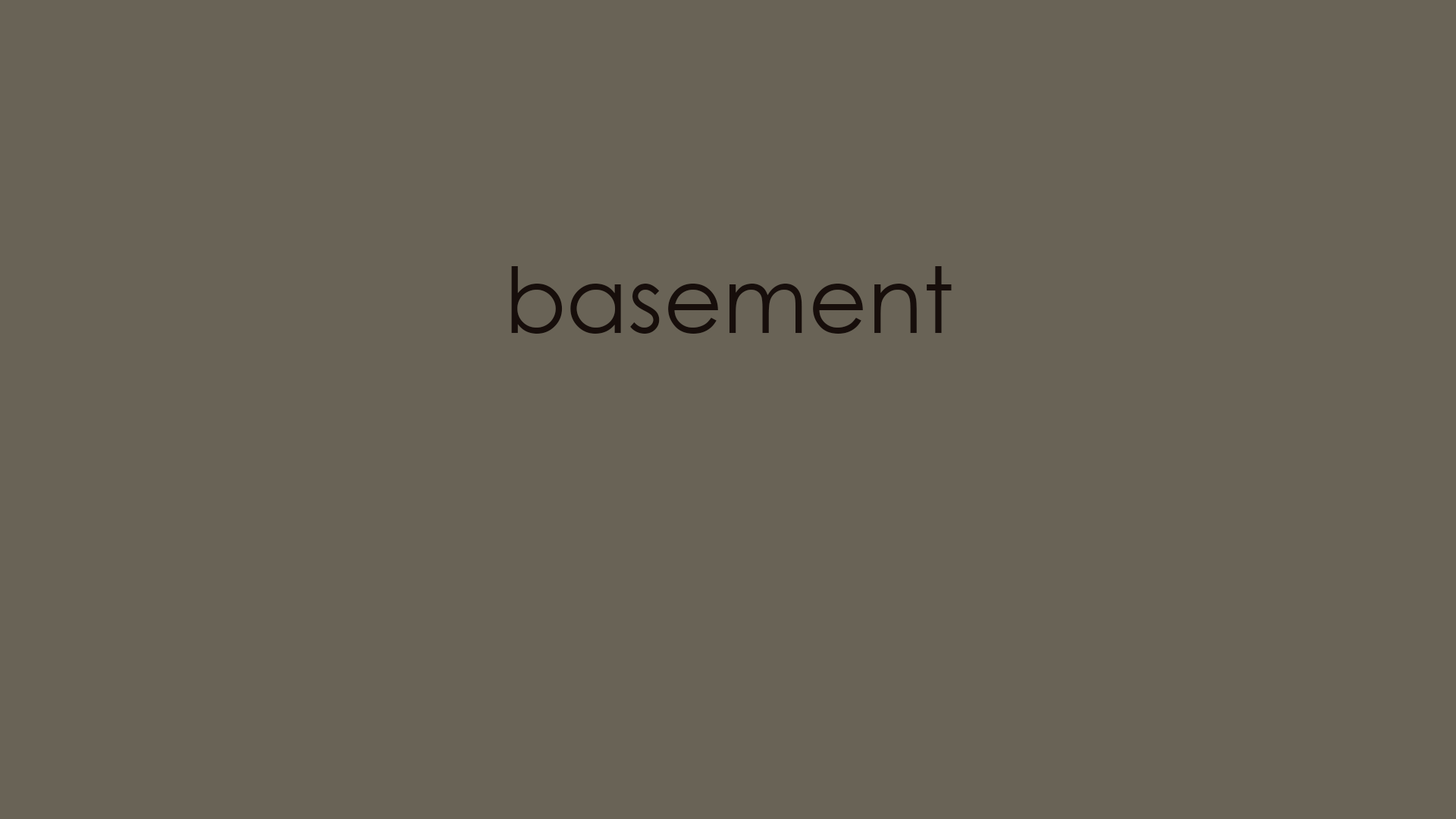
<style>
.page{position:relative;width:1456px;height:819px;background:#696356}
.page>*{position:absolute;margin:0}
.t1{font:91px "CenturyGothic";color:#170e0b}
</style>
<div class="page">
<p class="t1" style="left:511px;top:266px;width:441px;height:68px">basement</p>
</div>
